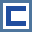
<style>
.page{position:relative;width:32px;height:32px;background:#ffffff}
.page>*{position:absolute;margin:0}
.t1{font:38.6px "Percy-Pixel";color:#204d9f}
</style>
<div class="page">
<p class="t1" style="left:6px;top:6px;width:20px;height:20px">C</p>
</div>
